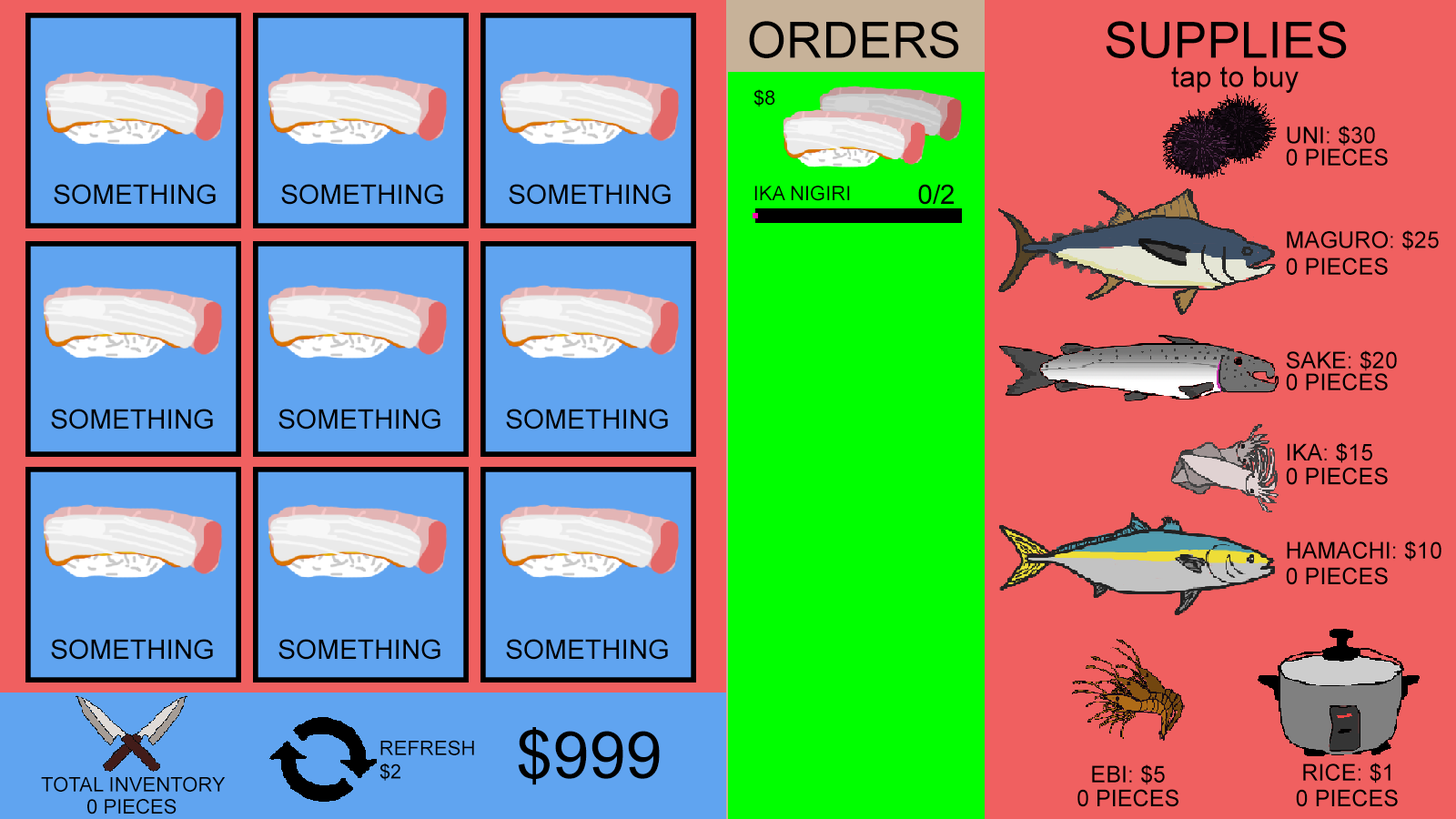
<style>
.page{position:relative;width:1456px;height:819px;background:#f06060}
.page>*{position:absolute;margin:0}
.t1{font:50px "ArialMT";color:#000000}
.t2{font:29.1px "ArialMT";color:#000000}
.t3{font:20px "ArialMT";color:#000000}
.t4{font:22.9px "ArialMT";color:#000000}
.t5{font:27.1px "ArialMT";color:#000000}
.t6{font:65.4px "ArialMT";color:#000000}
</style>
<div class="page">
<p class="t1" style="left:749px;top:21px;width:210px;height:37px">ORDERS</p>
<p class="t1" style="left:1106px;top:21px;width:241px;height:37px">SUPPLIES</p>
<p class="t2" style="left:1171px;top:66px;width:128px;height:27px">tap to buy</p>
<p class="t3" style="left:753px;top:89px;width:22px;height:18px">$8</p>
<p class="t4" style="left:1287px;top:126px;width:88px;height:20px">UNI: $30</p>
<p class="t4" style="left:1286px;top:148px;width:102px;height:18px">0 PIECES</p>
<p class="t5" style="left:54px;top:184px;width:162px;height:21px">SOMETHING</p>
<p class="t5" style="left:281px;top:184px;width:162px;height:21px">SOMETHING</p>
<p class="t5" style="left:509px;top:184px;width:162px;height:21px">SOMETHING</p>
<p class="t3" style="left:754px;top:186px;width:96px;height:15px">IKA NIGIRI</p>
<p class="t5" style="left:918px;top:184px;width:36px;height:21px">0/2</p>
<p class="t4" style="left:1287px;top:230px;width:152px;height:20px">MAGURO: $25</p>
<p class="t4" style="left:1286px;top:258px;width:102px;height:17px">0 PIECES</p>
<p class="t4" style="left:1286px;top:350px;width:111px;height:21px">SAKE: $20</p>
<p class="t4" style="left:1286px;top:373px;width:102px;height:17px">0 PIECES</p>
<p class="t5" style="left:51px;top:409px;width:162px;height:21px">SOMETHING</p>
<p class="t5" style="left:278px;top:409px;width:162px;height:21px">SOMETHING</p>
<p class="t5" style="left:506px;top:409px;width:162px;height:21px">SOMETHING</p>
<p class="t4" style="left:1287px;top:442px;width:85px;height:21px">IKA: $15</p>
<p class="t4" style="left:1286px;top:467px;width:102px;height:18px">0 PIECES</p>
<p class="t4" style="left:1287px;top:541px;width:154px;height:20px">HAMACHI: $10</p>
<p class="t4" style="left:1286px;top:567px;width:102px;height:18px">0 PIECES</p>
<p class="t5" style="left:51px;top:639px;width:162px;height:21px">SOMETHING</p>
<p class="t5" style="left:278px;top:639px;width:162px;height:21px">SOMETHING</p>
<p class="t5" style="left:506px;top:639px;width:162px;height:21px">SOMETHING</p>
<p class="t6" style="left:518px;top:727px;width:142px;height:58px">$999</p>
<p class="t3" style="left:380px;top:740px;width:94px;height:15px">REFRESH</p>
<p class="t3" style="left:379px;top:763px;width:21px;height:18px">$2</p>
<p class="t4" style="left:1092px;top:764px;width:73px;height:21px">EBI: $5</p>
<p class="t4" style="left:1303px;top:763px;width:87px;height:20px">RICE: $1</p>
<p class="t3" style="left:41px;top:776px;width:185px;height:16px">TOTAL INVENTORY</p>
<p class="t4" style="left:1077px;top:789px;width:101px;height:18px">0 PIECES</p>
<p class="t4" style="left:1296px;top:789px;width:102px;height:18px">0 PIECES</p>
<p class="t3" style="left:87px;top:799px;width:90px;height:15px">0 PIECES</p>
</div>
